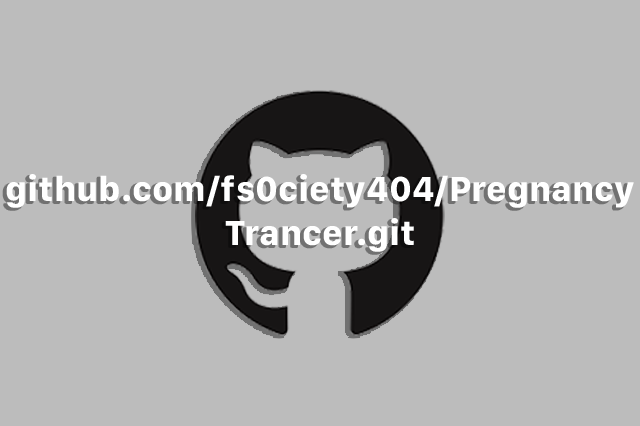
<style>
.page{position:relative;width:640px;height:426px;background:#bcbcbc}
.page>*{position:absolute;margin:0}
.t1{font:36px "SFCompact-Bold";color:#ffffff}
</style>
<div class="page">
<p class="t1" style="left:6px;top:174px;width:628px;height:78px;text-align:center">github.com/fs0ciety404/PregnancyTrancer.git</p>
</div>
